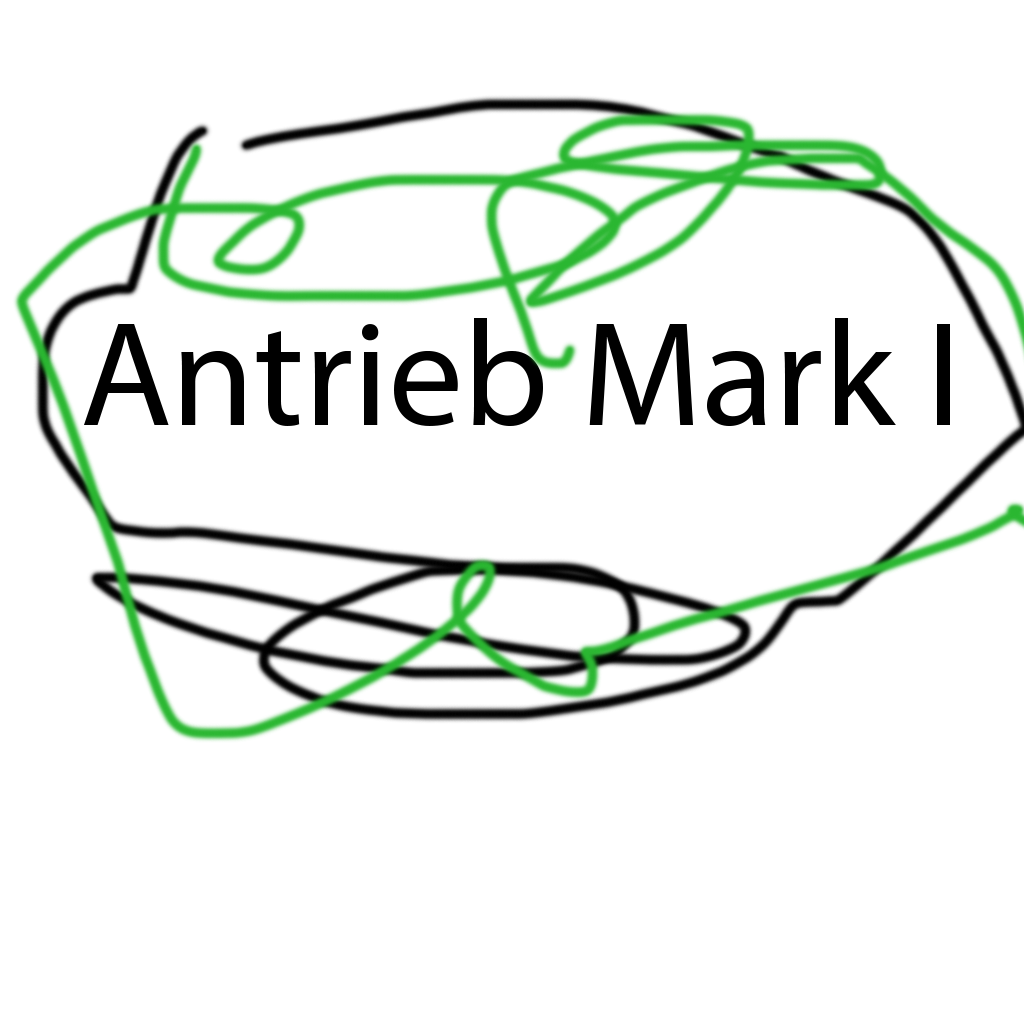
<style>
.page{position:relative;width:1024px;height:1024px;background:#ffffff}
.page>*{position:absolute;margin:0}
.t1{font:150px "MyriadPro-Regular";color:#000000}
</style>
<div class="page">
<p class="t1" style="left:84px;top:318px;width:866px;height:108px">Antrieb Mark I</p>
</div>
